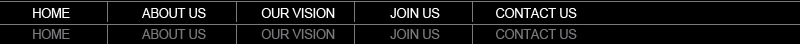
<style>
.page{position:relative;width:800px;height:44px;background:#000000}
.page>*{position:absolute;margin:0}
.t1{font:12.5px "ArialMT";color:#ffffff}
.t2{font:12.5px "ArialMT";color:#7a7a7d}
</style>
<div class="page">
<p class="t1" style="left:33px;top:8px;width:37px;height:10px">HOME</p>
<p class="t1" style="left:142px;top:8px;width:64px;height:10px">ABOUT US</p>
<p class="t1" style="left:261px;top:8px;width:74px;height:10px">OUR VISION</p>
<p class="t1" style="left:390px;top:8px;width:50px;height:10px">JOIN US</p>
<p class="t1" style="left:496px;top:8px;width:81px;height:10px">CONTACT US</p>
<p class="t2" style="left:33px;top:29px;width:37px;height:10px">HOME</p>
<p class="t2" style="left:142px;top:29px;width:64px;height:10px">ABOUT US</p>
<p class="t2" style="left:261px;top:29px;width:74px;height:10px">OUR VISION</p>
<p class="t2" style="left:390px;top:29px;width:50px;height:10px">JOIN US</p>
<p class="t2" style="left:496px;top:29px;width:81px;height:10px">CONTACT US</p>
</div>
